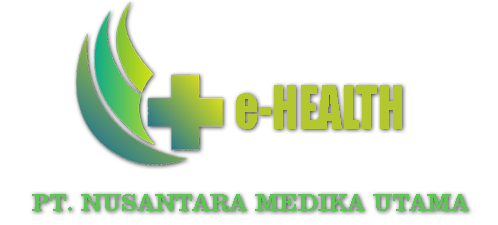
<style>
.page{position:relative;width:498px;height:225px;background:#ffffff}
.page>*{position:absolute;margin:0}
.t1{font:56.2px "Impact";color:#b3c82f;scale:0.85 1}
.t2{font:24.9px "ClarendonBT-Roman";color:#61c458}
</style>
<div class="page">
<p class="t1" style="left:236px;top:85px;width:166px;height:44px">e-HEALTH</p>
<p class="t2" style="left:32px;top:194px;width:437px;height:17px">PT. NUSANTARA MEDIKA UTAMA</p>
</div>
